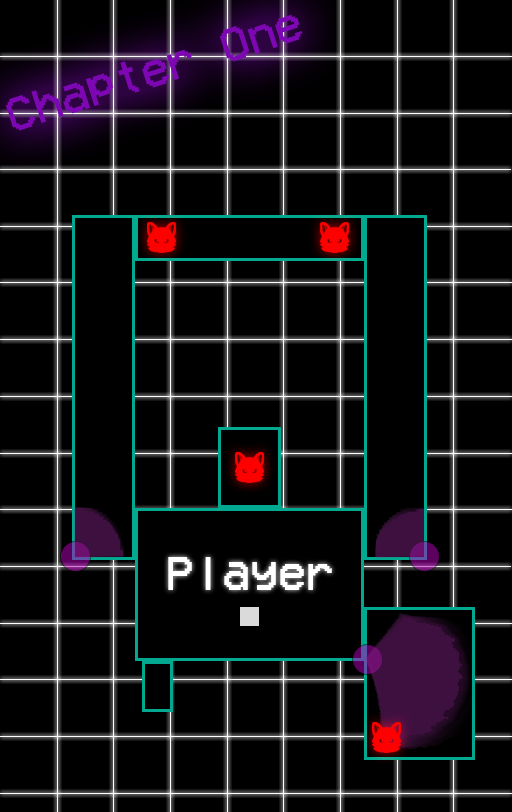
<style>
.page{position:relative;width:512px;height:812px;background:#000000}
.page>*{position:absolute;margin:0}
.t1{font:48px "VCROSDMono";color:#7d08b3}
.t2{font:48px "VCROSDMono";color:#ffffff}
</style>
<div class="page">
<p class="t1" style="left:5px;top:14px;width:298px;height:117px;rotate:-18deg">Chapter One</p>
<p class="t2" style="left:168px;top:557px;width:164px;height:33px">Player</p>
</div>
